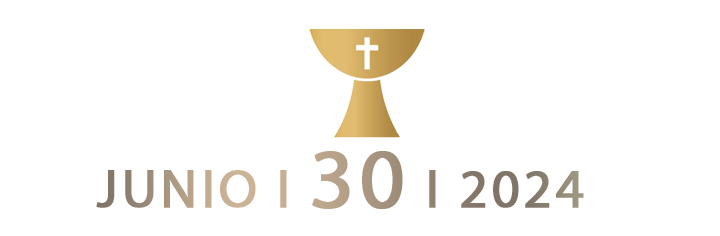
<style>
.page{position:relative;width:720px;height:236px;background:#ffffff}
.page>*{position:absolute;margin:0}
.t1{font:54.5px "MyriadPro-Regular";letter-spacing:0.05em;text-transform:uppercase;font-weight:bold}
.t2{font:85.3px "MyriadPro-Regular";letter-spacing:0.05em;text-transform:uppercase;font-weight:bold}
</style>
<div class="page">
<p class="t1" style="left:96px;top:151px;width:488px;height:58px">JUNIO I <span class="t2">30</span> I 2024</p>
</div>
